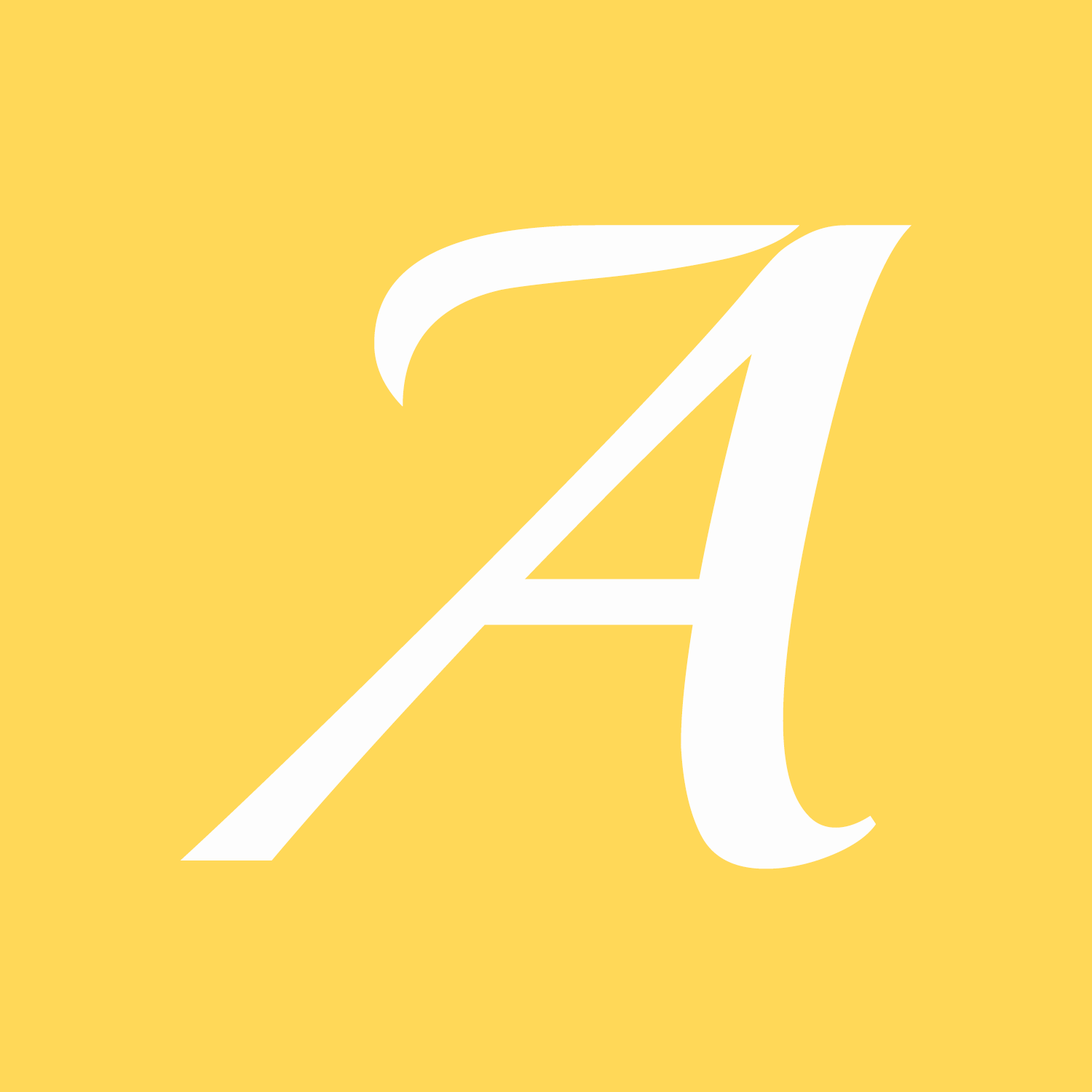
<style>
.page{position:relative;width:1092px;height:1092px;background:#ffd858}
.page>*{position:absolute;margin:0}
.t1{font:910px "Playball-Regular";letter-spacing:0.12em;color:#fdfdfd}
</style>
<div class="page">
<p class="t1" style="left:180px;top:225px;width:731px;height:644px">A</p>
</div>
